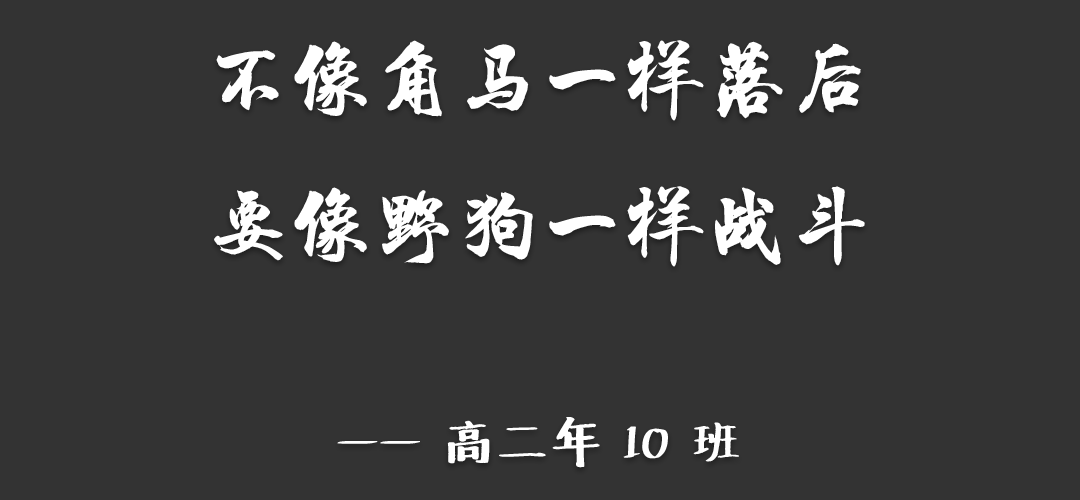
<style>
.page{position:relative;width:1080px;height:500px;background:#333333}
.page>*{position:absolute;margin:0}
.t1{font:83.3px "HYChengXingJ";color:#ffffff}
.t2{font:50px "Undefined";color:#ffffff}
</style>
<div class="page">
<p class="t1" style="left:214px;top:40px;width:651px;height:428px;text-align:center">不像角马一样落后<br>要像野狗一样战斗<br><span class="t2"><br>—— 高二年 10 班</span></p>
</div>
